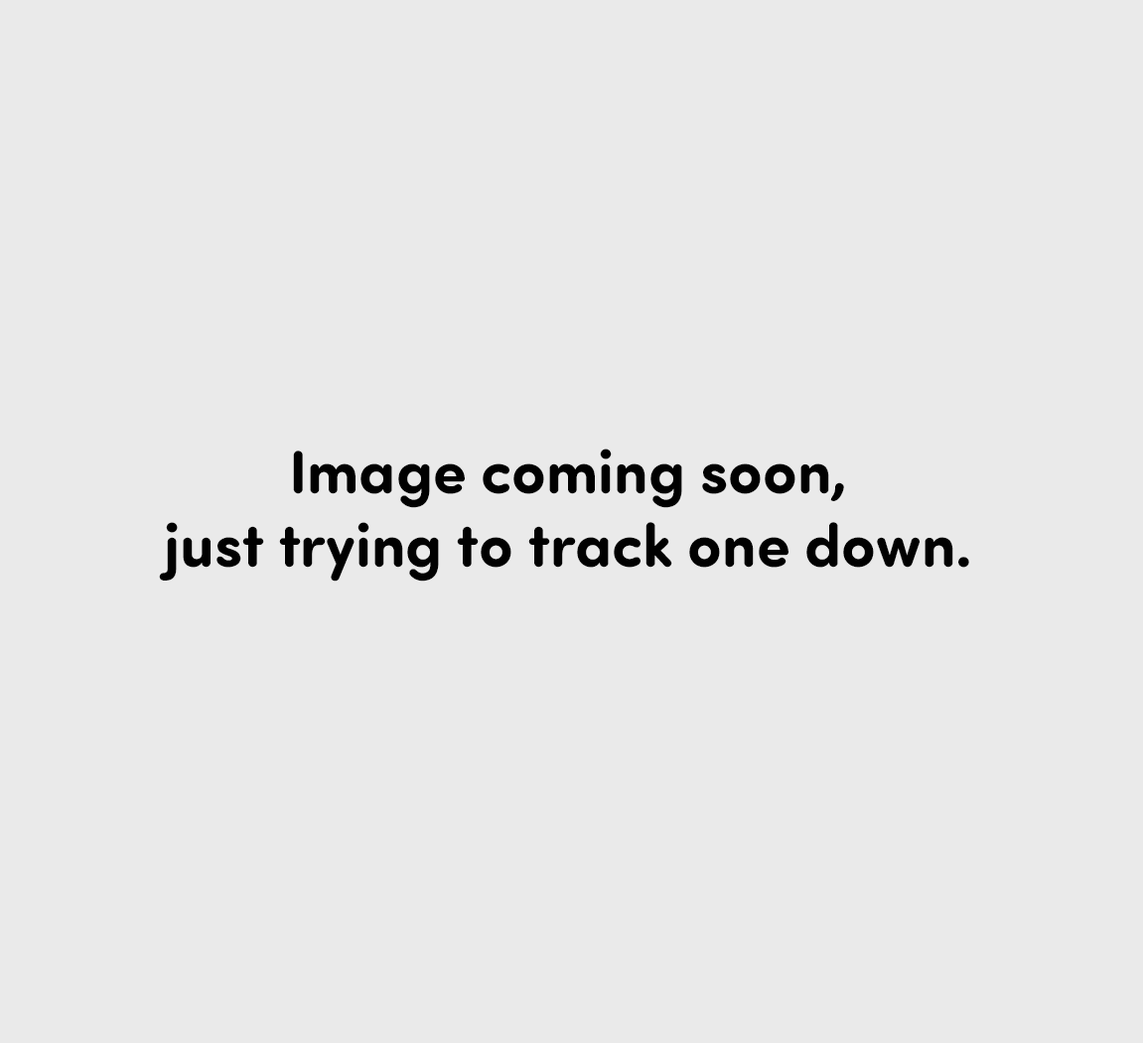
<style>
.page{position:relative;width:1143px;height:1043px;background:#eaeaea}
.page>*{position:absolute;margin:0}
.t1{font:61.2px "SofiaProSoftBold";color:#010101}
</style>
<div class="page">
<p class="t1" style="left:159px;top:449px;width:810px;height:133px;text-align:center">Image coming soon,<br>just trying to track one down.</p>
</div>
